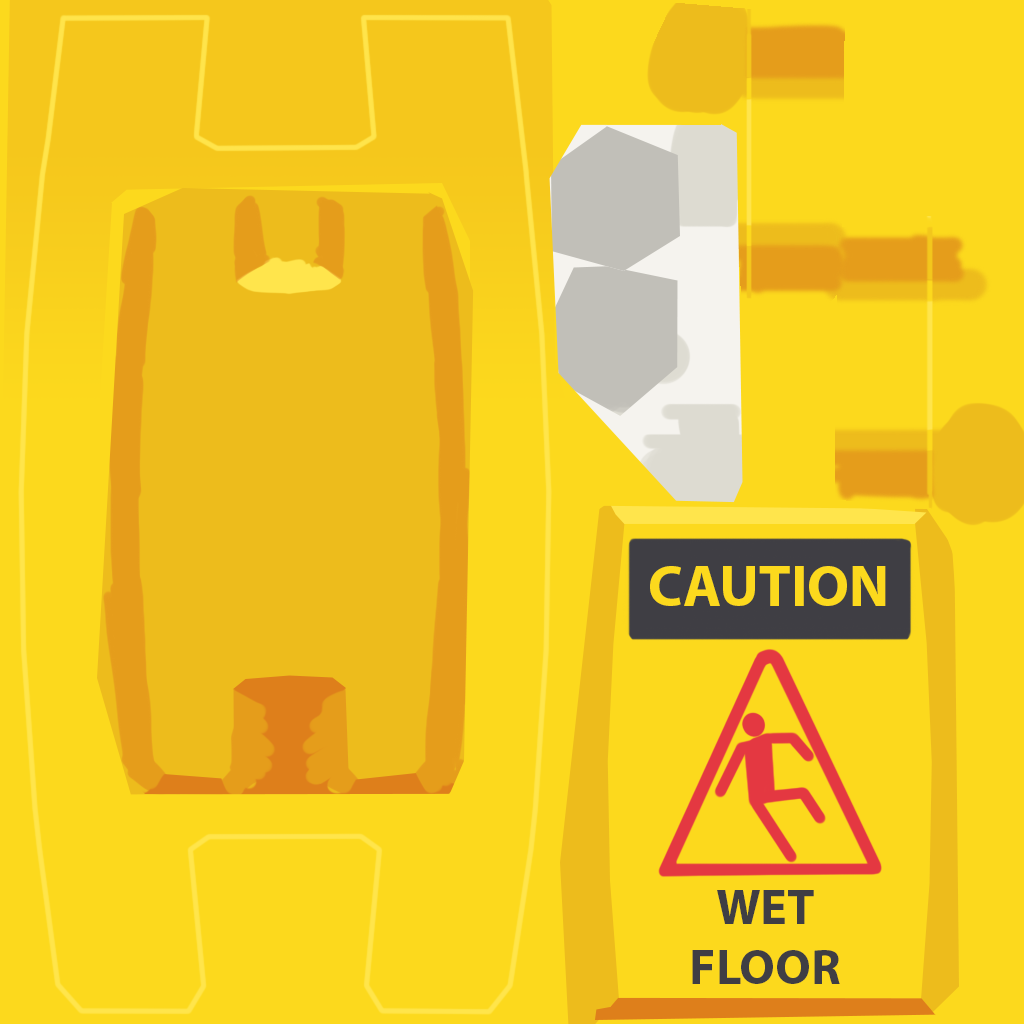
<style>
.page{position:relative;width:1024px;height:1024px;background:#fcd91d}
.page>*{position:absolute;margin:0}
.t1{font:58.3px "MyriadPro-Bold";color:#fcd91d}
.t2{font:50px "MyriadPro-Bold";color:#3f3e44}
</style>
<div class="page">
<p class="t1" style="left:650px;top:566px;width:236px;height:40px">CAUTION</p>
<p class="t2" style="left:692px;top:890px;width:148px;height:94px;text-align:center">WET <br>FLOOR</p>
</div>
